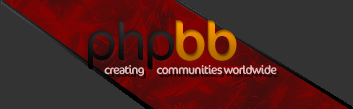
<style>
.page{position:relative;width:353px;height:109px;background:#333333}
.page>*{position:absolute;margin:0}
.t1{font:55px "Cocon-Light";letter-spacing:-0.06em;color:#171717}
.t2{font:55px "Cocon-Regular";letter-spacing:-0.05em}
.t3{font:12px "Cocon-Regular";letter-spacing:-0.075em;color:#e8cece}
</style>
<div class="page">
<p class="t1" style="left:88px;top:20px;width:86px;height:50px">php</p>
<p class="t2" style="left:175px;top:20px;width:62px;height:41px">bb</p>
<p class="t3" style="left:104px;top:65px;width:173px;height:11px;opacity:0.9">creating       communities worldwide</p>
</div>
